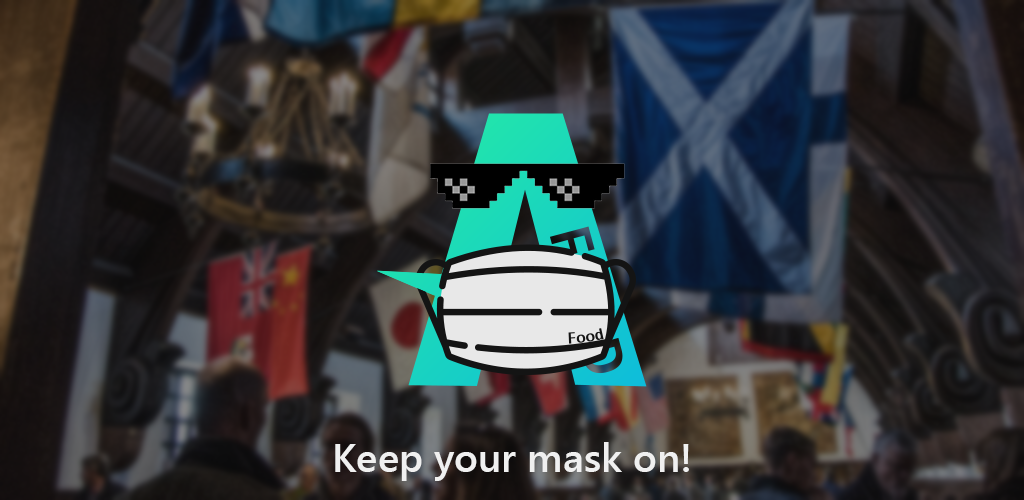
<style>
.page{position:relative;width:1024px;height:500px}
.page>*{position:absolute;margin:0}
.t1{font:40px "SegoeUI-Semibold";color:#f0f0f0}
</style>
<div class="page">
<p class="t1" style="left:335px;top:442px;width:354px;height:39px">Keep your mask on!</p>
</div>
